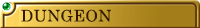
<style>
.page{position:relative;width:200px;height:28px}
.page>*{position:absolute;margin:0}
.t1{font:16px "CenturySchoolbook";letter-spacing:0.025em;color:#321a02}
</style>
<div class="page">
<p class="t1" style="left:21px;top:9px;width:90px;height:13px">DUNGEON</p>
</div>
